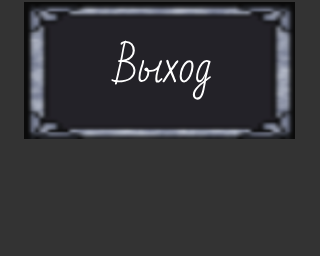
<style>
.page{position:relative;width:320px;height:256px;background:#333333}
.page>*{position:absolute;margin:0}
.t1{font:43px "BadScript-Regular";color:#ffffff}
</style>
<div class="page">
<p class="t1" style="left:111px;top:40px;width:100px;height:60px">Выход</p>
</div>
